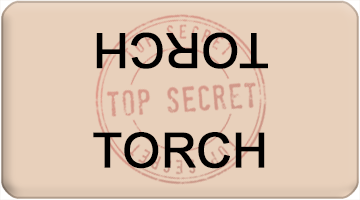
<style>
.page{position:relative;width:360px;height:200px;background:#e8d0bb}
.page>*{position:absolute;margin:0}
.t1{font:48px "ArialMT";color:#000000;font-weight:bold}
</style>
<div class="page">
<p class="t1" style="left:96px;top:32px;width:172px;height:37px;rotate:180deg">TORCH</p>
<p class="t1" style="left:93px;top:132px;width:172px;height:37px">TORCH</p>
</div>
